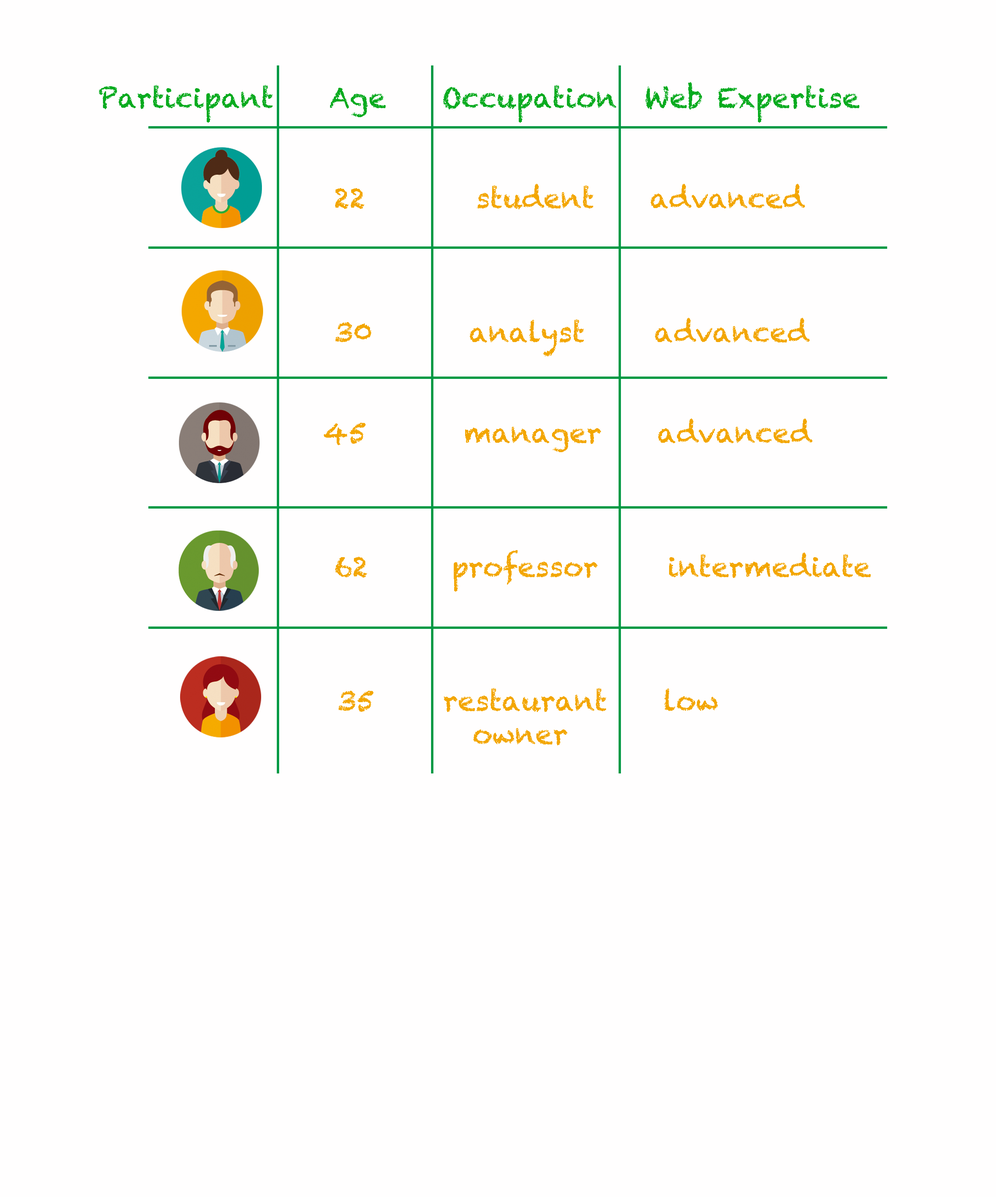
<style>
.page{position:relative;width:996px;height:1197px;background:#fffefe}
.page>*{position:absolute;margin:0}
.t1{font:27.9px "Chalkduster";color:#f3a600}
.t2{font:27.9px "Chalkduster";color:#08ab1f}
</style>
<div class="page">
<p class="t1" style="left:99px;top:82px;width:772px;height:663px"><span class="t2">Participant    Age    Occupation  Web Expertise<br><br><br>                 </span>22        student    advanced<br><br><br><br>                 30       analyst     advanced<br><br><br>             45       manager    advanced<br><br><br><br>                 62      professor     intermediate<br><br><br><br>              35     restaurant    low<br>                           owner</p>
</div>
